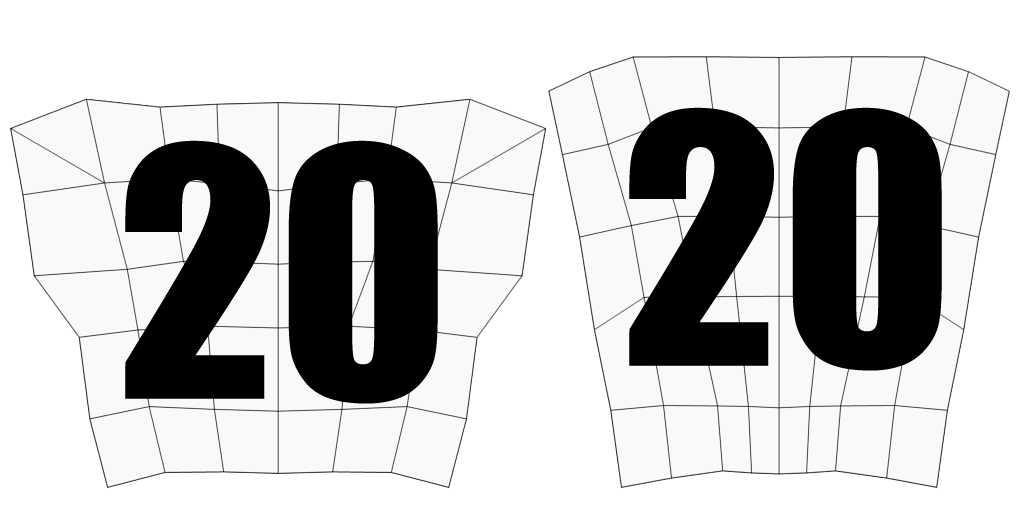
<style>
.page{position:relative;width:1024px;height:512px;background:#ffffff}
.page>*{position:absolute;margin:0}
.t1{font:320px "Impact";color:#000000}
</style>
<div class="page">
<p class="t1" style="left:629px;top:107px;width:313px;height:264px">20</p>
<p class="t1" style="left:125px;top:140px;width:313px;height:264px">20</p>
</div>
